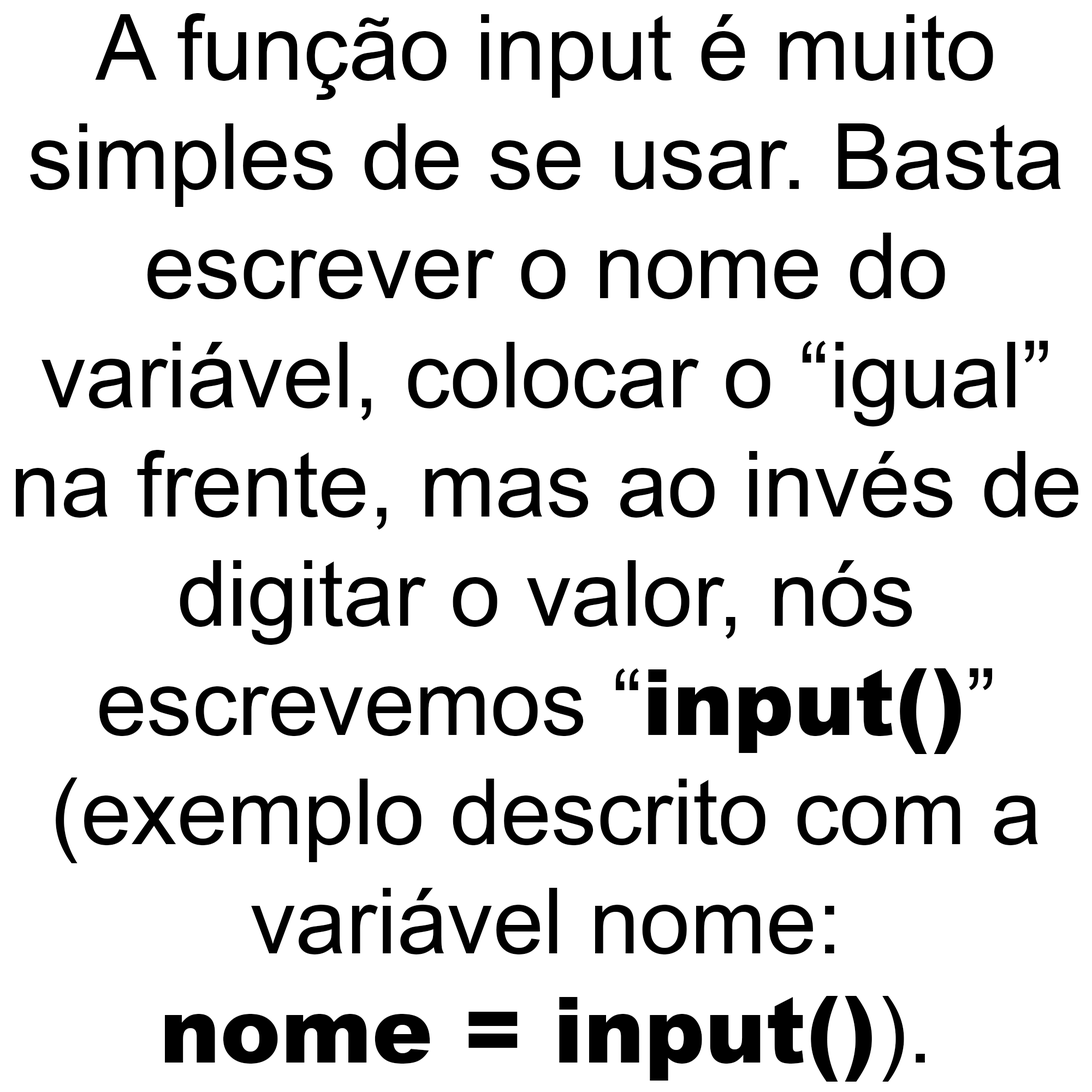
<style>
.page{position:relative;width:1092px;height:1092px;background:#ffffff}
.page>*{position:absolute;margin:0}
.t1{font:91px "ArialMT";color:#000000}
.t2{font:91px "Arial-Black";color:#000000}
</style>
<div class="page">
<p class="t1" style="left:16px;top:13px;width:1062px;height:1069px;text-align:center">A função input é muito<br>simples de se usar. Basta<br>escrever o nome do<br>variável, colocar o “igual”<br>na frente, mas ao invés de<br>digitar o valor, nós<br>escrevemos “<span class="t2">input()</span>”<br>(exemplo descrito com a<br>variável nome:<br><span class="t2">nome = input()</span>).</p>
</div>
